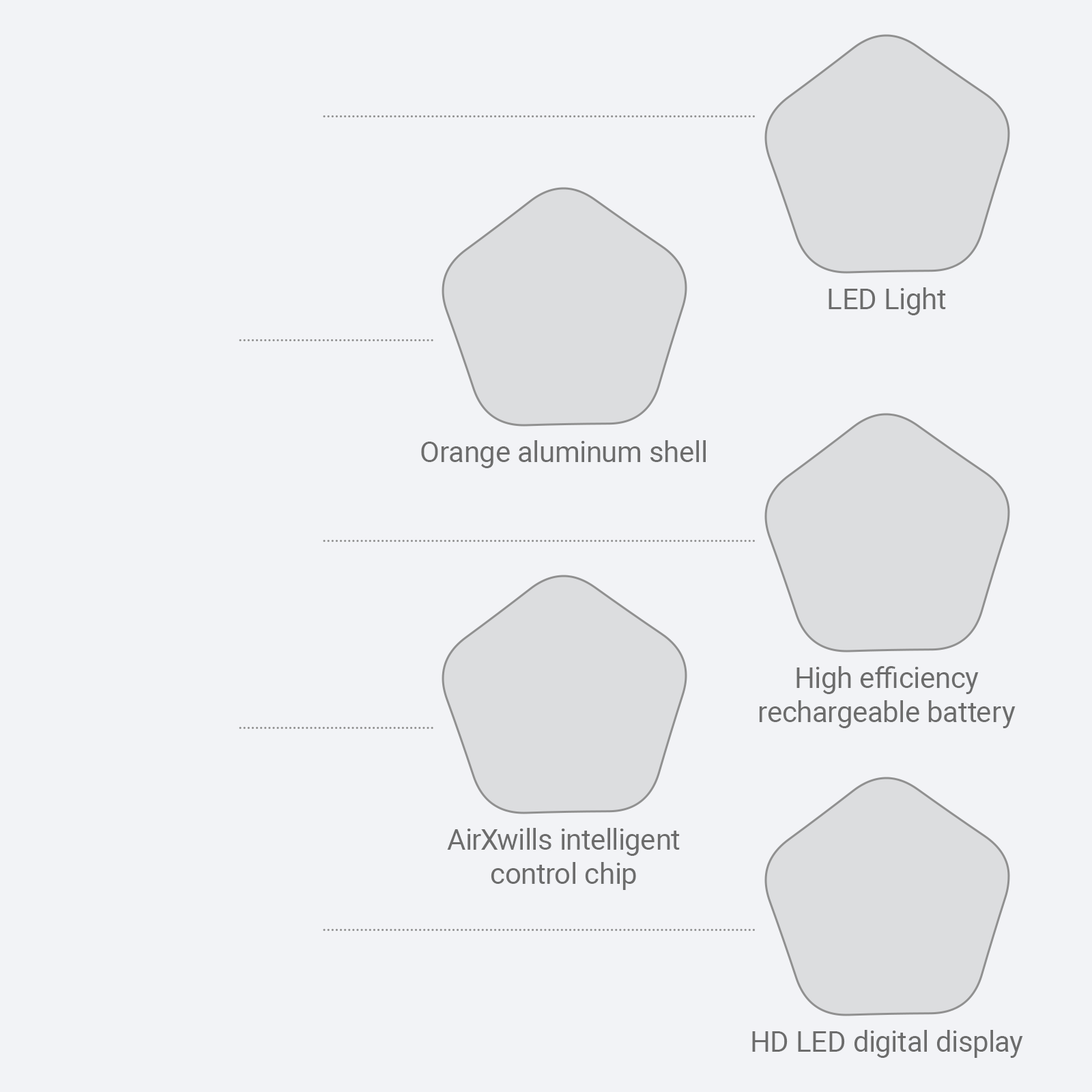
<style>
.page{position:relative;width:1092px;height:1092px;background:#f2f3f6}
.page>*{position:absolute;margin:0}
.t1{font:28.7px "Roboto-Regular";color:#6c6c6c}
</style>
<div class="page">
<p class="t1" style="left:829px;top:287px;width:117px;height:28px">LED Light</p>
<p class="t1" style="left:421px;top:440px;width:285px;height:28px">Orange aluminum shell</p>
<p class="t1" style="left:759px;top:666px;width:257px;height:62px;text-align:center">High efficiency<br>rechargeable battery</p>
<p class="t1" style="left:447px;top:828px;width:233px;height:62px;text-align:center">AirXwills intelligent<br>control chip</p>
<p class="t1" style="left:752px;top:1030px;width:271px;height:28px">HD LED digital display</p>
</div>
